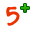
<style>
.page{position:relative;width:32px;height:32px;background:#ffffff}
.page>*{position:absolute;margin:0}
.t1{font:36px "CompleteinHim";color:#ec3200}
</style>
<div class="page">
<p class="t1" style="left:6px;top:6px;width:14px;height:20px">5</p>
</div>
